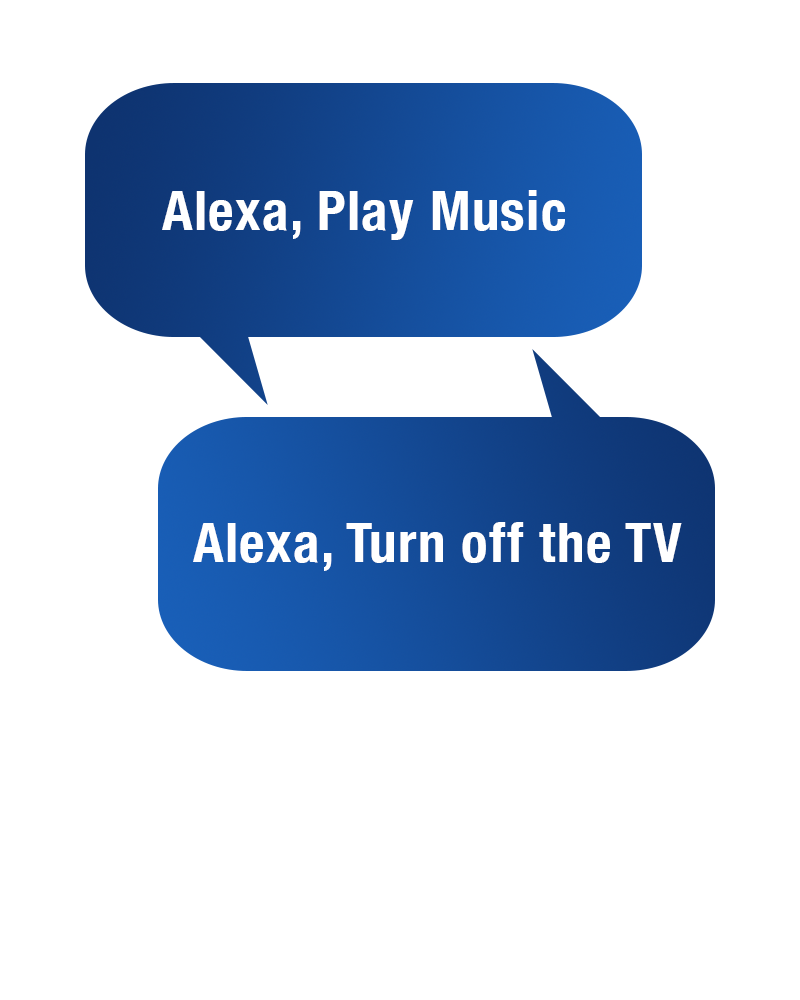
<style>
.page{position:relative;width:800px;height:1000px;background:#ffffff}
.page>*{position:absolute;margin:0}
.t1{font:56px "HelveticaNeue-CondensedBold";letter-spacing:0.025em;color:#ffffff}
.t2{font:55px "HelveticaNeue-CondensedBold";letter-spacing:0.025em;color:#ffffff}
</style>
<div class="page">
<p class="t1" style="left:158px;top:191px;width:411px;height:50px">Alexa, Play Music</p>
<p class="t2" style="left:162px;top:190px;width:403px;height:50px">Alexa, Play Music</p>
<p class="t2" style="left:193px;top:522px;width:489px;height:49px">Alexa, Turn off the TV</p>
</div>
